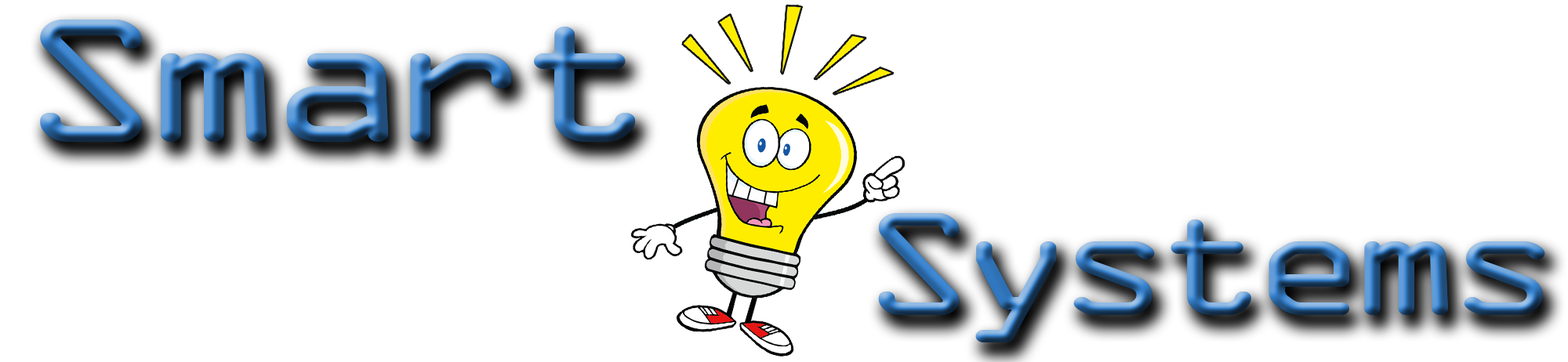
<style>
.page{position:relative;width:1568px;height:362px;background:#ffffff}
.page>*{position:absolute;margin:0}
.t1{font:187.9px "OCRAExtended";letter-spacing:-0.1em;scale:1.3 1}
.t2{font:156.6px "OCRAExtended";letter-spacing:-0.1em;scale:1.24 1}
</style>
<div class="page">
<p class="t1" style="left:40px;top:19px;width:596px;height:123px">Smart</p>
<p class="t2" style="left:878px;top:212px;width:667px;height:131px">Systems</p>
</div>
